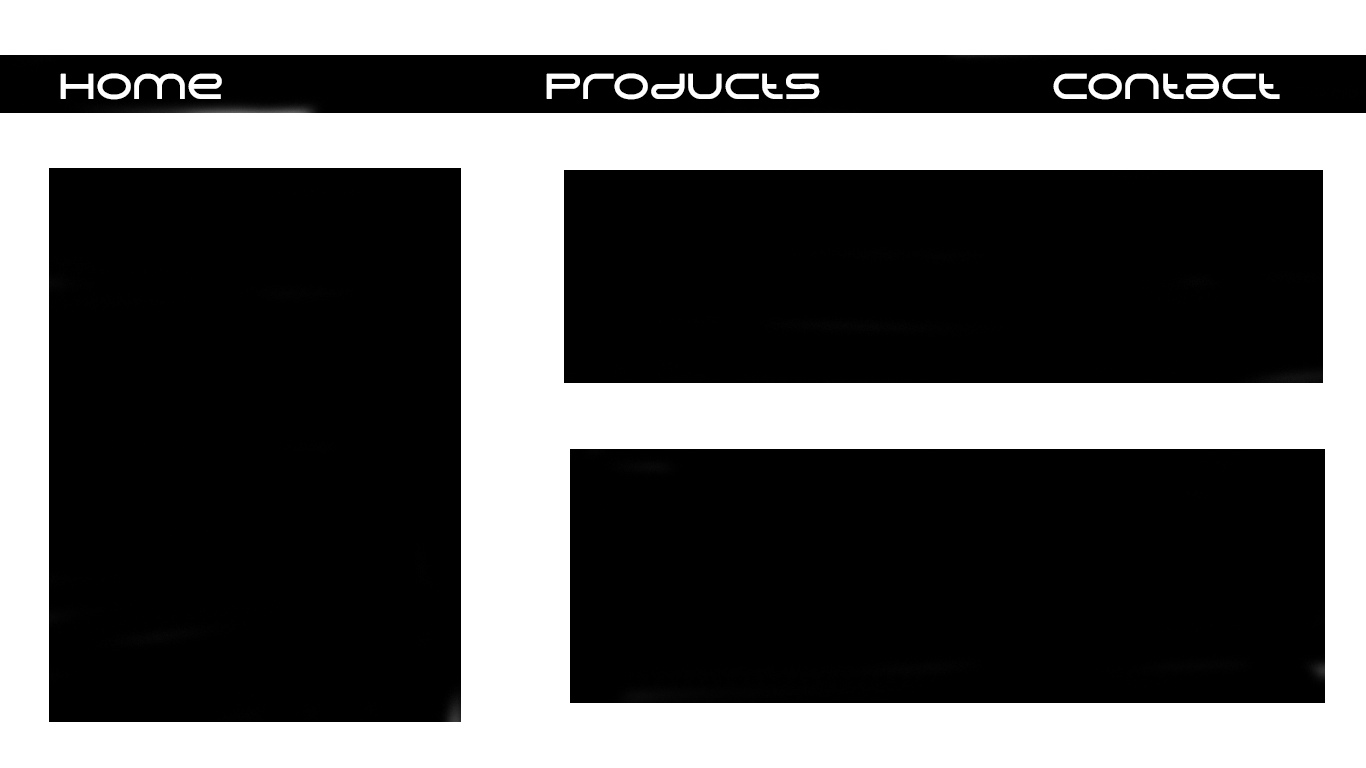
<style>
.page{position:relative;width:1366px;height:768px;background:#000000}
.page>*{position:absolute;margin:0}
.t1{font:36px "AerosRegular";color:#ffffff}
</style>
<div class="page">
<p class="t1" style="left:60px;top:73px;width:162px;height:27px">Home</p>
<p class="t1" style="left:546px;top:73px;width:274px;height:27px">Products</p>
<p class="t1" style="left:1053px;top:73px;width:227px;height:27px">Contact</p>
</div>
